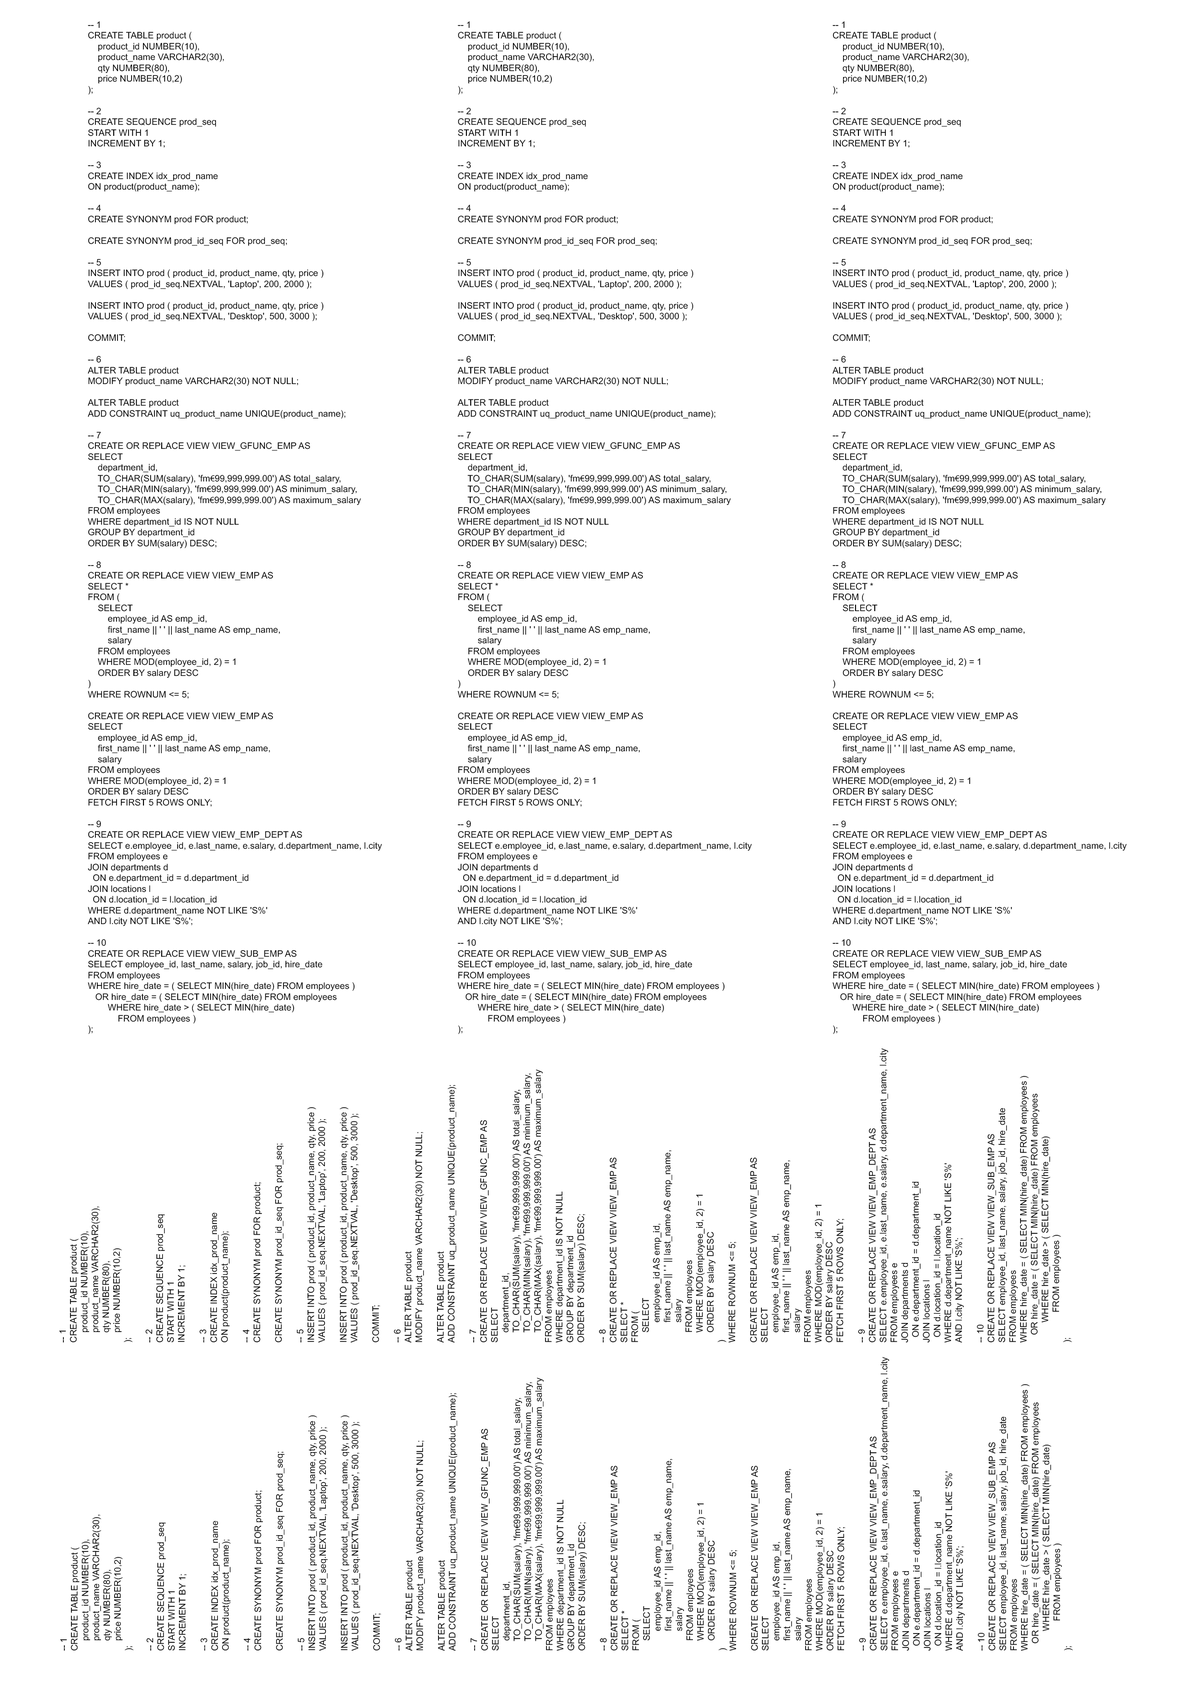
<style>
.page{position:relative;width:1190px;height:1684px;background:#ffffff}
.page>*{position:absolute;margin:0}
.t1{font:9px "AKbalthomKhmerNew";color:#000000}
.t2{font:9px "MyriadPro-Regular";color:#000000}
</style>
<div class="page">
<p class="t1" style="left:88px;top:21px;width:294px;height:1013px">-- 1<br>CREATE TABLE product (<br>    product_id NUMBER(10),<br>    product_name VARCHAR2(30),<br>    qty NUMBER(80),<br>    price NUMBER(10,2)<br>);<br><br>-- 2<br>CREATE SEQUENCE prod_seq<br>START WITH 1<br>INCREMENT BY 1;<br><br>-- 3<br>CREATE INDEX idx_prod_name<br>ON product(product_name);<br><br>-- 4<br>CREATE SYNONYM prod FOR product;<br><br>CREATE SYNONYM prod_id_seq FOR prod_seq;<br><br>-- 5<br>INSERT INTO prod ( product_id, product_name, qty, price )<br>VALUES ( prod_id_seq.NEXTVAL, 'Laptop', 200, 2000 );<br><br>INSERT INTO prod ( product_id, product_name, qty, price )<br>VALUES ( prod_id_seq.NEXTVAL, 'Desktop', 500, 3000 );<br><br>COMMIT;<br><br>-- 6<br>ALTER TABLE product<br>MODIFY product_name VARCHAR2(30) NOT NULL;<br><br>ALTER TABLE product<br>ADD CONSTRAINT uq_product_name UNIQUE(product_name);<br><br>-- 7<br>CREATE OR REPLACE VIEW VIEW_GFUNC_EMP AS<br>SELECT<br>    department_id,<br>    TO_CHAR(SUM(salary), 'fm<span class="t2">€</span>99,999,999.00') AS total_salary,<br>    TO_CHAR(MIN(salary), 'fm<span class="t2">€</span>99,999,999.00') AS minimum_salary,<br>    TO_CHAR(MAX(salary), 'fm<span class="t2">€</span>99,999,999.00') AS maximum_salary<br>FROM employees<br>WHERE department_id IS NOT NULL<br>GROUP BY department_id<br>ORDER BY SUM(salary) DESC;<br><br>-- 8<br>CREATE OR REPLACE VIEW VIEW_EMP AS<br>SELECT *<br>FROM (<br>    SELECT<br>        employee_id AS emp_id,<br>        first_name || ' ' || last_name AS emp_name,<br>        salary<br>    FROM employees<br>    WHERE MOD(employee_id, 2) = 1<br>    ORDER BY salary DESC<br>)<br>WHERE ROWNUM &lt;= 5;<br><br>CREATE OR REPLACE VIEW VIEW_EMP AS<br>SELECT<br>    employee_id AS emp_id,<br>    first_name || ' ' || last_name AS emp_name,<br>    salary<br>FROM employees<br>WHERE MOD(employee_id, 2) = 1<br>ORDER BY salary DESC<br>FETCH FIRST 5 ROWS ONLY;<br><br>-- 9<br>CREATE OR REPLACE VIEW VIEW_EMP_DEPT AS<br>SELECT e.employee_id, e.last_name, e.salary, d.department_name, l.city<br>FROM employees e <br>JOIN departments d<br>  ON e.department_id = d.department_id<br>JOIN locations l<br>  ON d.location_id = l.location_id<br>WHERE d.department_name NOT LIKE 'S%'<br>AND l.city NOT LIKE 'S%';<br><br>-- 10<br>CREATE OR REPLACE VIEW VIEW_SUB_EMP AS<br>SELECT employee_id, last_name, salary, job_id, hire_date<br>FROM employees<br>WHERE hire_date = ( SELECT MIN(hire_date) FROM employees )<br>   OR hire_date = ( SELECT MIN(hire_date) FROM employees<br>        WHERE hire_date &gt; ( SELECT MIN(hire_date)<br>            FROM employees )<br>);</p>
<p class="t1" style="left:457px;top:21px;width:295px;height:1013px">-- 1<br>CREATE TABLE product (<br>    product_id NUMBER(10),<br>    product_name VARCHAR2(30),<br>    qty NUMBER(80),<br>    price NUMBER(10,2)<br>);<br><br>-- 2<br>CREATE SEQUENCE prod_seq<br>START WITH 1<br>INCREMENT BY 1;<br><br>-- 3<br>CREATE INDEX idx_prod_name<br>ON product(product_name);<br><br>-- 4<br>CREATE SYNONYM prod FOR product;<br><br>CREATE SYNONYM prod_id_seq FOR prod_seq;<br><br>-- 5<br>INSERT INTO prod ( product_id, product_name, qty, price )<br>VALUES ( prod_id_seq.NEXTVAL, 'Laptop', 200, 2000 );<br><br>INSERT INTO prod ( product_id, product_name, qty, price )<br>VALUES ( prod_id_seq.NEXTVAL, 'Desktop', 500, 3000 );<br><br>COMMIT;<br><br>-- 6<br>ALTER TABLE product<br>MODIFY product_name VARCHAR2(30) NOT NULL;<br><br>ALTER TABLE product<br>ADD CONSTRAINT uq_product_name UNIQUE(product_name);<br><br>-- 7<br>CREATE OR REPLACE VIEW VIEW_GFUNC_EMP AS<br>SELECT<br>    department_id,<br>    TO_CHAR(SUM(salary), 'fm<span class="t2">€</span>99,999,999.00') AS total_salary,<br>    TO_CHAR(MIN(salary), 'fm<span class="t2">€</span>99,999,999.00') AS minimum_salary,<br>    TO_CHAR(MAX(salary), 'fm<span class="t2">€</span>99,999,999.00') AS maximum_salary<br>FROM employees<br>WHERE department_id IS NOT NULL<br>GROUP BY department_id<br>ORDER BY SUM(salary) DESC;<br><br>-- 8<br>CREATE OR REPLACE VIEW VIEW_EMP AS<br>SELECT *<br>FROM (<br>    SELECT<br>        employee_id AS emp_id,<br>        first_name || ' ' || last_name AS emp_name,<br>        salary<br>    FROM employees<br>    WHERE MOD(employee_id, 2) = 1<br>    ORDER BY salary DESC<br>)<br>WHERE ROWNUM &lt;= 5;<br><br>CREATE OR REPLACE VIEW VIEW_EMP AS<br>SELECT<br>    employee_id AS emp_id,<br>    first_name || ' ' || last_name AS emp_name,<br>    salary<br>FROM employees<br>WHERE MOD(employee_id, 2) = 1<br>ORDER BY salary DESC<br>FETCH FIRST 5 ROWS ONLY;<br><br>-- 9<br>CREATE OR REPLACE VIEW VIEW_EMP_DEPT AS<br>SELECT e.employee_id, e.last_name, e.salary, d.department_name, l.city<br>FROM employees e <br>JOIN departments d<br>  ON e.department_id = d.department_id<br>JOIN locations l<br>  ON d.location_id = l.location_id<br>WHERE d.department_name NOT LIKE 'S%'<br>AND l.city NOT LIKE 'S%';<br><br>-- 10<br>CREATE OR REPLACE VIEW VIEW_SUB_EMP AS<br>SELECT employee_id, last_name, salary, job_id, hire_date<br>FROM employees<br>WHERE hire_date = ( SELECT MIN(hire_date) FROM employees )<br>   OR hire_date = ( SELECT MIN(hire_date) FROM employees<br>        WHERE hire_date &gt; ( SELECT MIN(hire_date)<br>            FROM employees )<br>);</p>
<p class="t1" style="left:833px;top:21px;width:294px;height:1013px">-- 1<br>CREATE TABLE product (<br>    product_id NUMBER(10),<br>    product_name VARCHAR2(30),<br>    qty NUMBER(80),<br>    price NUMBER(10,2)<br>);<br><br>-- 2<br>CREATE SEQUENCE prod_seq<br>START WITH 1<br>INCREMENT BY 1;<br><br>-- 3<br>CREATE INDEX idx_prod_name<br>ON product(product_name);<br><br>-- 4<br>CREATE SYNONYM prod FOR product;<br><br>CREATE SYNONYM prod_id_seq FOR prod_seq;<br><br>-- 5<br>INSERT INTO prod ( product_id, product_name, qty, price )<br>VALUES ( prod_id_seq.NEXTVAL, 'Laptop', 200, 2000 );<br><br>INSERT INTO prod ( product_id, product_name, qty, price )<br>VALUES ( prod_id_seq.NEXTVAL, 'Desktop', 500, 3000 );<br><br>COMMIT;<br><br>-- 6<br>ALTER TABLE product<br>MODIFY product_name VARCHAR2(30) NOT NULL;<br><br>ALTER TABLE product<br>ADD CONSTRAINT uq_product_name UNIQUE(product_name);<br><br>-- 7<br>CREATE OR REPLACE VIEW VIEW_GFUNC_EMP AS<br>SELECT<br>    department_id,<br>    TO_CHAR(SUM(salary), 'fm<span class="t2">€</span>99,999,999.00') AS total_salary,<br>    TO_CHAR(MIN(salary), 'fm<span class="t2">€</span>99,999,999.00') AS minimum_salary,<br>    TO_CHAR(MAX(salary), 'fm<span class="t2">€</span>99,999,999.00') AS maximum_salary<br>FROM employees<br>WHERE department_id IS NOT NULL<br>GROUP BY department_id<br>ORDER BY SUM(salary) DESC;<br><br>-- 8<br>CREATE OR REPLACE VIEW VIEW_EMP AS<br>SELECT *<br>FROM (<br>    SELECT<br>        employee_id AS emp_id,<br>        first_name || ' ' || last_name AS emp_name,<br>        salary<br>    FROM employees<br>    WHERE MOD(employee_id, 2) = 1<br>    ORDER BY salary DESC<br>)<br>WHERE ROWNUM &lt;= 5;<br><br>CREATE OR REPLACE VIEW VIEW_EMP AS<br>SELECT<br>    employee_id AS emp_id,<br>    first_name || ' ' || last_name AS emp_name,<br>    salary<br>FROM employees<br>WHERE MOD(employee_id, 2) = 1<br>ORDER BY salary DESC<br>FETCH FIRST 5 ROWS ONLY;<br><br>-- 9<br>CREATE OR REPLACE VIEW VIEW_EMP_DEPT AS<br>SELECT e.employee_id, e.last_name, e.salary, d.department_name, l.city<br>FROM employees e <br>JOIN departments d<br>  ON e.department_id = d.department_id<br>JOIN locations l<br>  ON d.location_id = l.location_id<br>WHERE d.department_name NOT LIKE 'S%'<br>AND l.city NOT LIKE 'S%';<br><br>-- 10<br>CREATE OR REPLACE VIEW VIEW_SUB_EMP AS<br>SELECT employee_id, last_name, salary, job_id, hire_date<br>FROM employees<br>WHERE hire_date = ( SELECT MIN(hire_date) FROM employees )<br>   OR hire_date = ( SELECT MIN(hire_date) FROM employees<br>        WHERE hire_date &gt; ( SELECT MIN(hire_date)<br>            FROM employees )<br>);</p>
<p class="t1" style="left:59px;top:1048px;width:1013px;height:295px;rotate:-90deg">-- 1<br>CREATE TABLE product (<br>    product_id NUMBER(10),<br>    product_name VARCHAR2(30),<br>    qty NUMBER(80),<br>    price NUMBER(10,2)<br>);<br><br>-- 2<br>CREATE SEQUENCE prod_seq<br>START WITH 1<br>INCREMENT BY 1;<br><br>-- 3<br>CREATE INDEX idx_prod_name<br>ON product(product_name);<br><br>-- 4<br>CREATE SYNONYM prod FOR product;<br><br>CREATE SYNONYM prod_id_seq FOR prod_seq;<br><br>-- 5<br>INSERT INTO prod ( product_id, product_name, qty, price )<br>VALUES ( prod_id_seq.NEXTVAL, 'Laptop', 200, 2000 );<br><br>INSERT INTO prod ( product_id, product_name, qty, price )<br>VALUES ( prod_id_seq.NEXTVAL, 'Desktop', 500, 3000 );<br><br>COMMIT;<br><br>-- 6<br>ALTER TABLE product<br>MODIFY product_name VARCHAR2(30) NOT NULL;<br><br>ALTER TABLE product<br>ADD CONSTRAINT uq_product_name UNIQUE(product_name);<br><br>-- 7<br>CREATE OR REPLACE VIEW VIEW_GFUNC_EMP AS<br>SELECT<br>    department_id,<br>    TO_CHAR(SUM(salary), 'fm<span class="t2">€</span>99,999,999.00') AS total_salary,<br>    TO_CHAR(MIN(salary), 'fm<span class="t2">€</span>99,999,999.00') AS minimum_salary,<br>    TO_CHAR(MAX(salary), 'fm<span class="t2">€</span>99,999,999.00') AS maximum_salary<br>FROM employees<br>WHERE department_id IS NOT NULL<br>GROUP BY department_id<br>ORDER BY SUM(salary) DESC;<br><br>-- 8<br>CREATE OR REPLACE VIEW VIEW_EMP AS<br>SELECT *<br>FROM (<br>    SELECT<br>        employee_id AS emp_id,<br>        first_name || ' ' || last_name AS emp_name,<br>        salary<br>    FROM employees<br>    WHERE MOD(employee_id, 2) = 1<br>    ORDER BY salary DESC<br>)<br>WHERE ROWNUM &lt;= 5;<br><br>CREATE OR REPLACE VIEW VIEW_EMP AS<br>SELECT<br>    employee_id AS emp_id,<br>    first_name || ' ' || last_name AS emp_name,<br>    salary<br>FROM employees<br>WHERE MOD(employee_id, 2) = 1<br>ORDER BY salary DESC<br>FETCH FIRST 5 ROWS ONLY;<br><br>-- 9<br>CREATE OR REPLACE VIEW VIEW_EMP_DEPT AS<br>SELECT e.employee_id, e.last_name, e.salary, d.department_name, l.city<br>FROM employees e <br>JOIN departments d<br>  ON e.department_id = d.department_id<br>JOIN locations l<br>  ON d.location_id = l.location_id<br>WHERE d.department_name NOT LIKE 'S%'<br>AND l.city NOT LIKE 'S%';<br><br>-- 10<br>CREATE OR REPLACE VIEW VIEW_SUB_EMP AS<br>SELECT employee_id, last_name, salary, job_id, hire_date<br>FROM employees<br>WHERE hire_date = ( SELECT MIN(hire_date) FROM employees )<br>   OR hire_date = ( SELECT MIN(hire_date) FROM employees<br>        WHERE hire_date &gt; ( SELECT MIN(hire_date)<br>            FROM employees )<br>);</p>
<p class="t1" style="left:60px;top:1356px;width:1013px;height:295px;rotate:-90deg">-- 1<br>CREATE TABLE product (<br>    product_id NUMBER(10),<br>    product_name VARCHAR2(30),<br>    qty NUMBER(80),<br>    price NUMBER(10,2)<br>);<br><br>-- 2<br>CREATE SEQUENCE prod_seq<br>START WITH 1<br>INCREMENT BY 1;<br><br>-- 3<br>CREATE INDEX idx_prod_name<br>ON product(product_name);<br><br>-- 4<br>CREATE SYNONYM prod FOR product;<br><br>CREATE SYNONYM prod_id_seq FOR prod_seq;<br><br>-- 5<br>INSERT INTO prod ( product_id, product_name, qty, price )<br>VALUES ( prod_id_seq.NEXTVAL, 'Laptop', 200, 2000 );<br><br>INSERT INTO prod ( product_id, product_name, qty, price )<br>VALUES ( prod_id_seq.NEXTVAL, 'Desktop', 500, 3000 );<br><br>COMMIT;<br><br>-- 6<br>ALTER TABLE product<br>MODIFY product_name VARCHAR2(30) NOT NULL;<br><br>ALTER TABLE product<br>ADD CONSTRAINT uq_product_name UNIQUE(product_name);<br><br>-- 7<br>CREATE OR REPLACE VIEW VIEW_GFUNC_EMP AS<br>SELECT<br>    department_id,<br>    TO_CHAR(SUM(salary), 'fm<span class="t2">€</span>99,999,999.00') AS total_salary,<br>    TO_CHAR(MIN(salary), 'fm<span class="t2">€</span>99,999,999.00') AS minimum_salary,<br>    TO_CHAR(MAX(salary), 'fm<span class="t2">€</span>99,999,999.00') AS maximum_salary<br>FROM employees<br>WHERE department_id IS NOT NULL<br>GROUP BY department_id<br>ORDER BY SUM(salary) DESC;<br><br>-- 8<br>CREATE OR REPLACE VIEW VIEW_EMP AS<br>SELECT *<br>FROM (<br>    SELECT<br>        employee_id AS emp_id,<br>        first_name || ' ' || last_name AS emp_name,<br>        salary<br>    FROM employees<br>    WHERE MOD(employee_id, 2) = 1<br>    ORDER BY salary DESC<br>)<br>WHERE ROWNUM &lt;= 5;<br><br>CREATE OR REPLACE VIEW VIEW_EMP AS<br>SELECT<br>    employee_id AS emp_id,<br>    first_name || ' ' || last_name AS emp_name,<br>    salary<br>FROM employees<br>WHERE MOD(employee_id, 2) = 1<br>ORDER BY salary DESC<br>FETCH FIRST 5 ROWS ONLY;<br><br>-- 9<br>CREATE OR REPLACE VIEW VIEW_EMP_DEPT AS<br>SELECT e.employee_id, e.last_name, e.salary, d.department_name, l.city<br>FROM employees e <br>JOIN departments d<br>  ON e.department_id = d.department_id<br>JOIN locations l<br>  ON d.location_id = l.location_id<br>WHERE d.department_name NOT LIKE 'S%'<br>AND l.city NOT LIKE 'S%';<br><br>-- 10<br>CREATE OR REPLACE VIEW VIEW_SUB_EMP AS<br>SELECT employee_id, last_name, salary, job_id, hire_date<br>FROM employees<br>WHERE hire_date = ( SELECT MIN(hire_date) FROM employees )<br>   OR hire_date = ( SELECT MIN(hire_date) FROM employees<br>        WHERE hire_date &gt; ( SELECT MIN(hire_date)<br>            FROM employees )<br>);</p>
</div>
